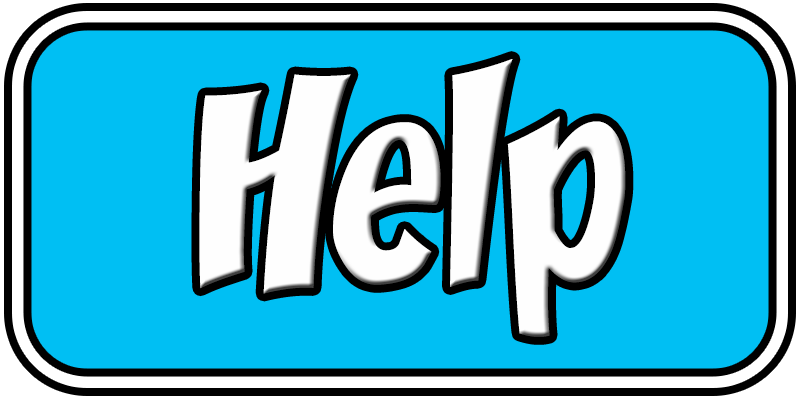
<style>
.page{position:relative;width:800px;height:400px;background:#00bff3}
.page>*{position:absolute;margin:0}
.t1{font:266.7px "Yikes";color:#fefefe}
</style>
<div class="page">
<p class="t1" style="left:199px;top:59px;width:427px;height:278px">Help</p>
</div>
